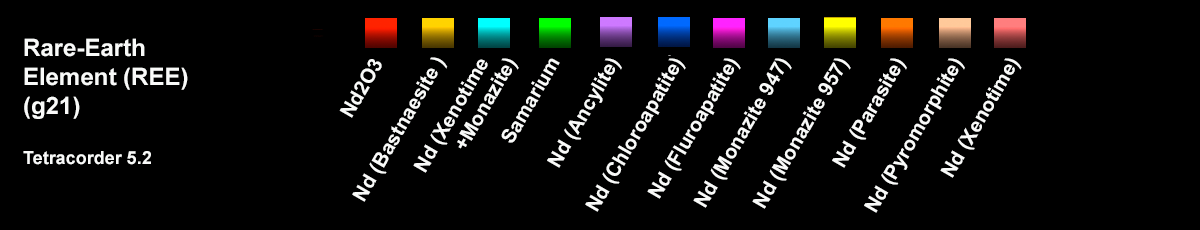
<style>
.page{position:relative;width:1200px;height:230px;background:#000000}
.page>*{position:absolute;margin:0}
.t1{font:24px "Arial-BoldMT";color:#f9faf9}
.t2{font:18px "Arial-BoldMT";color:#f9faf9}
.t3{font:20px "Arial-BoldMT";color:#f9faf9}
</style>
<div class="page">
<p class="t1" style="left:23px;top:38px;width:165px;height:127px">Rare-Earth<br>Element (REE)<br>(g21)<br><br><span class="t2">Tetracorder 5.2</span></p>
<p class="t3" style="left:339px;top:59px;width:43px;height:59px;rotate:-60deg">Nd2O3</p>
<p class="t3" style="left:352px;top:57px;width:96px;height:145px;rotate:-60deg">Nd (Bastnaesite )</p>
<p class="t3" style="left:413px;top:58px;width:106px;height:115px;rotate:-60deg">Nd (Xenotime<br>       +Monazite)</p>
<p class="t3" style="left:501px;top:58px;width:59px;height:85px;rotate:-60deg">Samarium</p>
<p class="t3" style="left:547px;top:58px;width:75px;height:110px;rotate:-60deg">Nd (Ancylite)</p>
<p class="t3" style="left:585px;top:58px;width:101px;height:154px;rotate:-60deg">Nd (Chloroapatite)</p>
<p class="t3" style="left:647px;top:58px;width:94px;height:141px;rotate:-60deg">Nd (Fluroapatite)</p>
<p class="t3" style="left:693px;top:58px;width:99px;height:150px;rotate:-60deg">Nd (Monazite 947)</p>
<p class="t3" style="left:752px;top:58px;width:99px;height:151px;rotate:-60deg"><span class="t1">  </span>Nd (Monazite 957)</p>
<p class="t3" style="left:832px;top:58px;width:75px;height:110px;rotate:-60deg"><span class="t2"> </span>Nd (Parasite)</p>
<p class="t3" style="left:864px;top:58px;width:101px;height:155px;rotate:-60deg"><span class="t2"> </span>Nd (Pyromorphite)</p>
<p class="t3" style="left:940px;top:58px;width:82px;height:120px;rotate:-60deg">Nd (Xenotime)</p>
</div>
